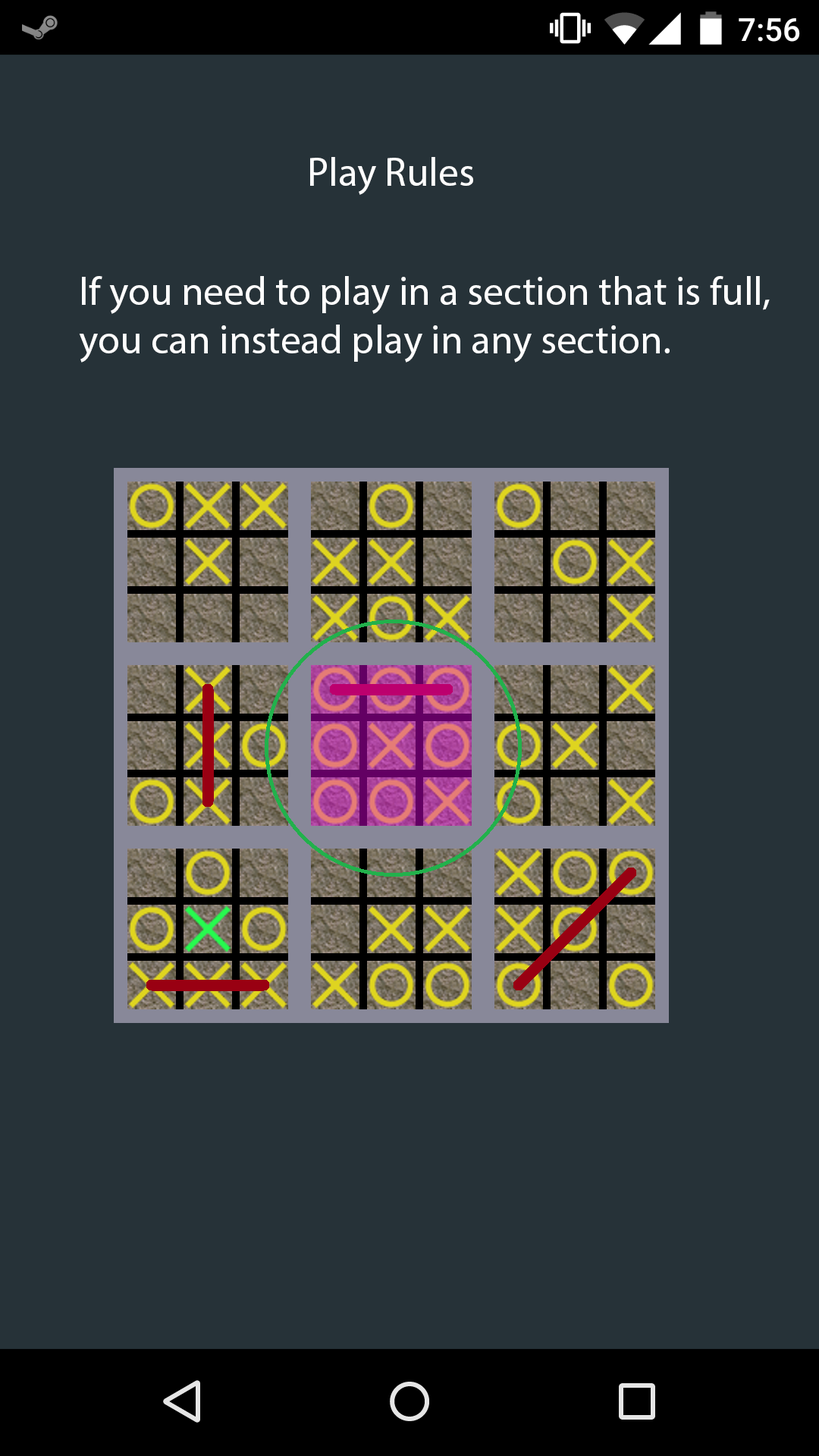
<style>
.page{position:relative;width:819px;height:1456px;background:#263238}
.page>*{position:absolute;margin:0}
.t1{font:40.4px "MyriadPro-Regular";color:#fefefe}
</style>
<div class="page">
<p class="t1" style="left:310px;top:157px;width:163px;height:38px">Play Rules</p>
<p class="t1" style="left:79px;top:276px;width:691px;height:86px">If you need to play in a section that is full,<br>you can instead play in any section.</p>
</div>
